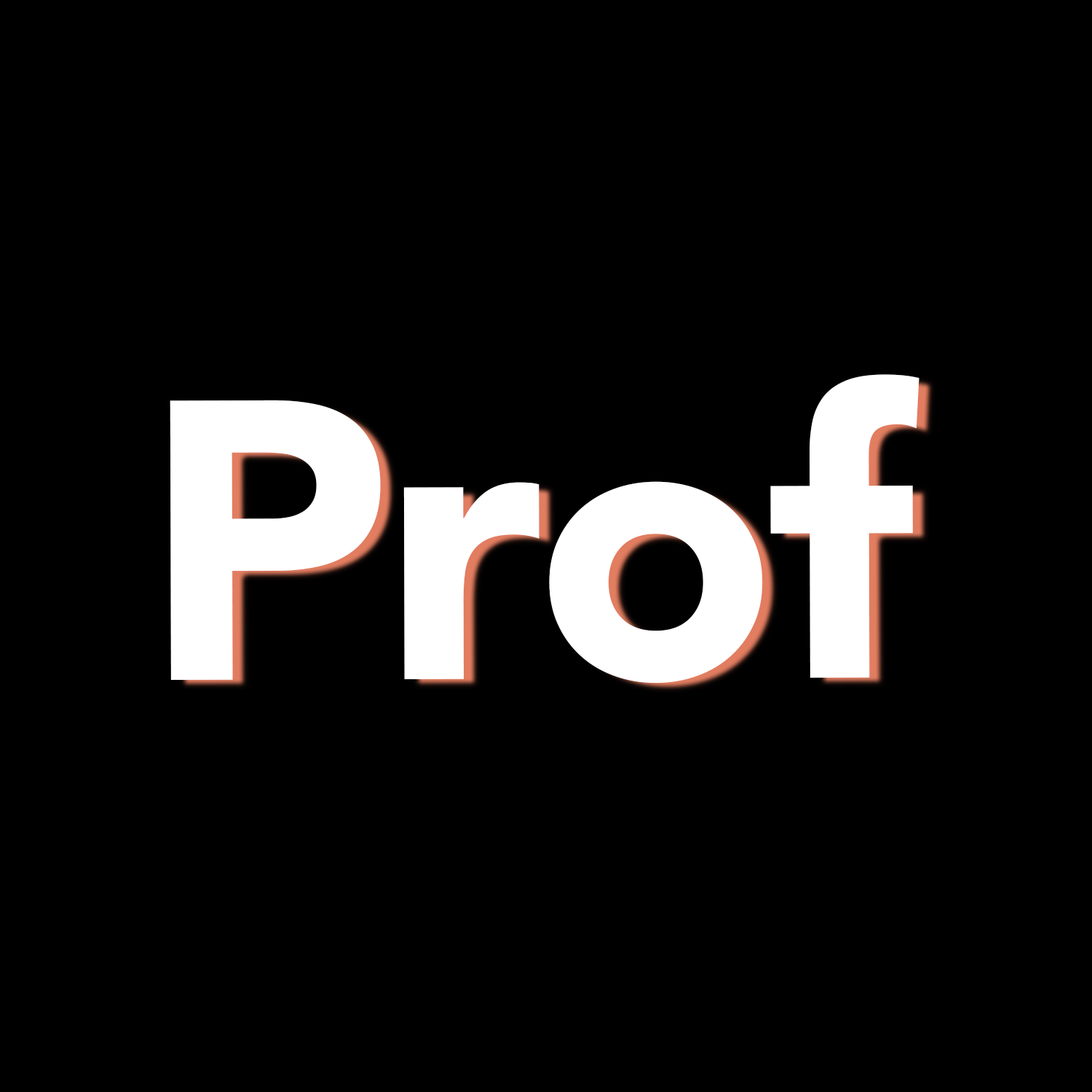
<style>
.page{position:relative;width:1092px;height:1092px;background:#000000}
.page>*{position:absolute;margin:0}
.t1{font:394.3px "Avenir-Black";letter-spacing:-0.02em;color:#ffffff}
</style>
<div class="page">
<p class="t1" style="left:170px;top:374px;width:749px;height:310px">Prof</p>
</div>
